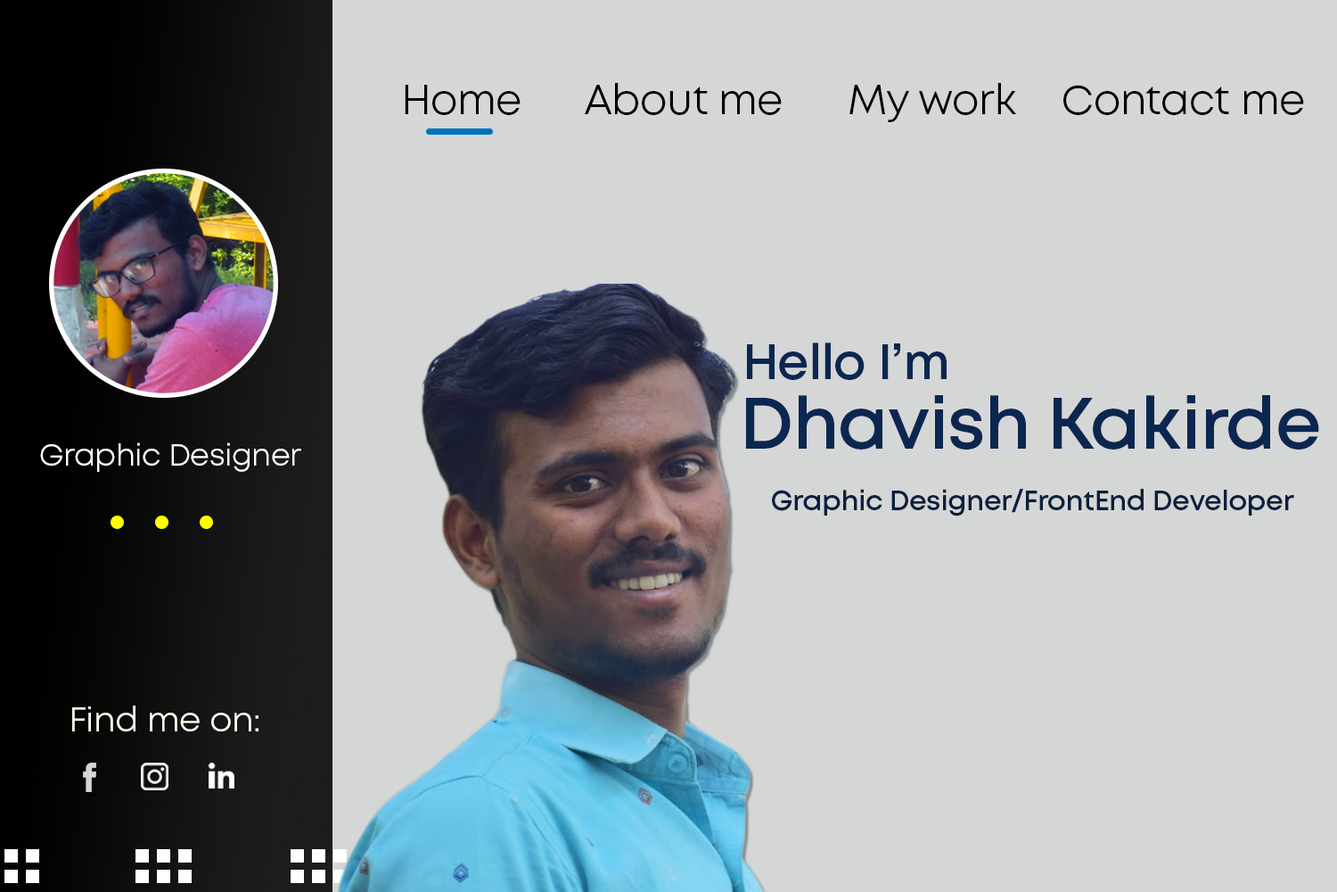
<style>
.page{position:relative;width:1337px;height:892px;background:#d5d6d6}
.page>*{position:absolute;margin:0}
.t1{font:41.1px "Mont-Book";letter-spacing:-0.014em;color:#000000}
.t2{font:49.7px "Mont-SemiBold";letter-spacing:-0.014em;color:#0b2650}
.t3{font:72.5px "Mont-SemiBold";letter-spacing:-0.014em;color:#0b2650}
.t4{font:30.3px "Mont-Book";letter-spacing:-0.014em;color:#ffffff}
.t5{font:27.9px "Mont-SemiBold";letter-spacing:-0.014em;color:#09203e}
.t6{font:34.1px "Mont-Book";letter-spacing:-0.014em;color:#fdfef0}
</style>
<div class="page">
<p class="t1" style="left:405px;top:85px;width:116px;height:30px">Home</p>
<p class="t1" style="left:585px;top:83px;width:197px;height:32px">About me</p>
<p class="t1" style="left:850px;top:83px;width:166px;height:39px">My work</p>
<p class="t1" style="left:1064px;top:85px;width:240px;height:30px">Contact me</p>
<p class="t2" style="left:747px;top:342px;width:200px;height:38px">Hello I’m</p>
<p class="t3" style="left:746px;top:395px;width:574px;height:54px">Dhavish Kakirde</p>
<p class="t4" style="left:40px;top:442px;width:261px;height:30px">Graphic Designer</p>
<p class="t5" style="left:772px;top:489px;width:523px;height:27px">Graphic Designer/FrontEnd Developer</p>
<p class="t6" style="left:72px;top:705px;width:187px;height:26px">Find me on:</p>
</div>
